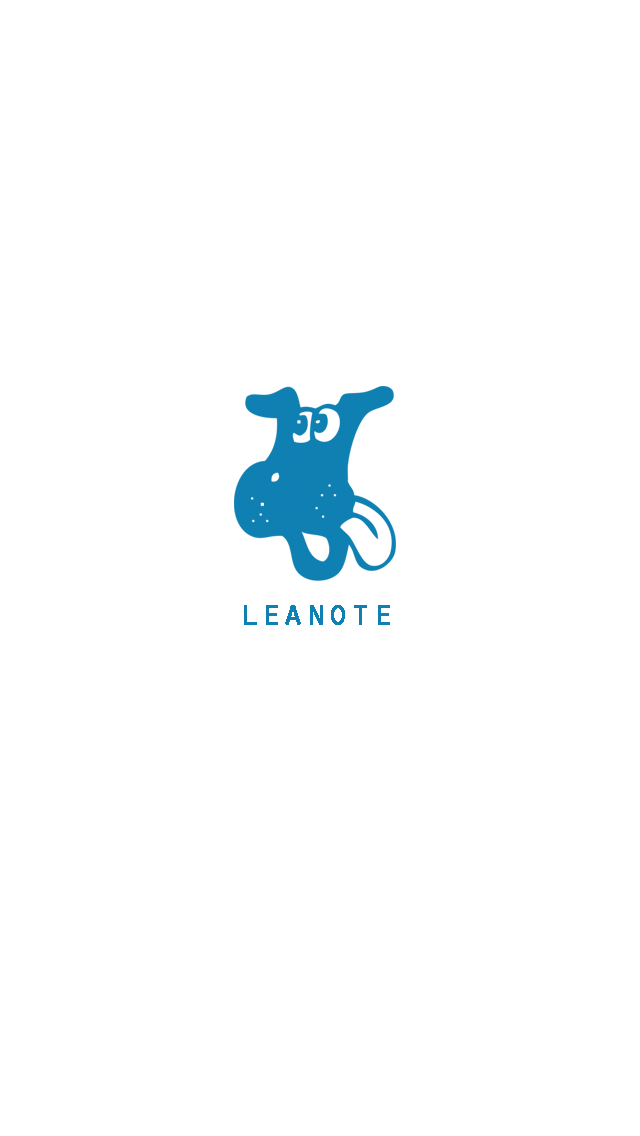
<style>
.page{position:relative;width:640px;height:1136px;background:#ffffff}
.page>*{position:absolute;margin:0}
.t1{font:36px "OratorStd";color:#0f80b2;font-weight:bold}
</style>
<div class="page">
<p class="t1" style="left:244px;top:605px;width:146px;height:20px">leanote</p>
</div>
